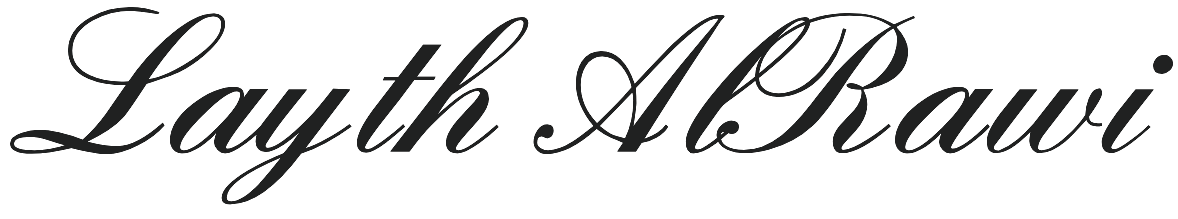
<style>
.page{position:relative;width:1178px;height:219px;background:#ffffff}
.page>*{position:absolute;margin:0}
.t1{font:200px "EnglandHandDB";color:#202121}
</style>
<div class="page">
<p class="t1" style="left:10px;top:7px;width:1163px;height:198px">Layth AlRawi</p>
</div>
